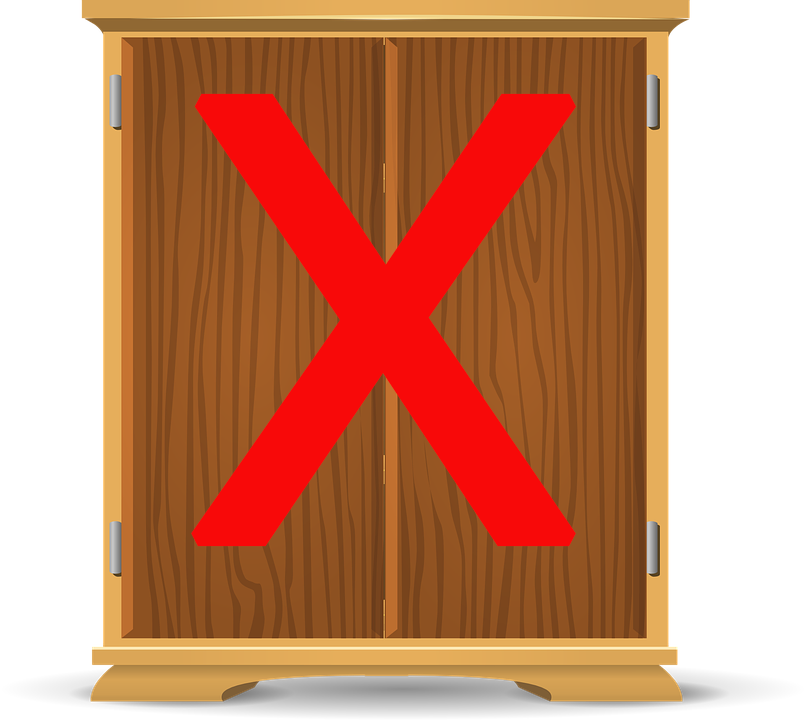
<style>
.page{position:relative;width:806px;height:720px;background:#ffffff}
.page>*{position:absolute;margin:0}
.t1{font:600px "Verdana";color:#f80909;font-weight:bold}
</style>
<div class="page">
<p class="t1" style="left:191px;top:93px;width:386px;height:454px">X</p>
</div>
